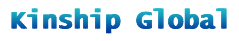
<style>
.page{position:relative;width:239px;height:41px;background:#ffffff}
.page>*{position:absolute;margin:0}
.t1{font:25px "LucidaConsole";font-weight:bold}
</style>
<div class="page">
<p class="t1" style="left:11px;top:8px;width:214px;height:26px">Kinship Global</p>
<p class="t1" style="left:13px;top:8px;width:214px;height:26px">Kinship Global</p>
</div>
